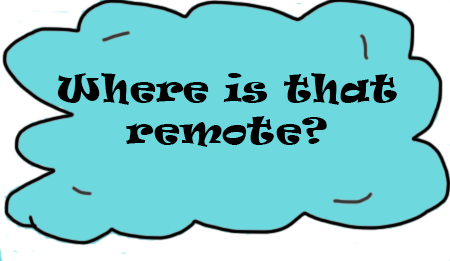
<style>
.page{position:relative;width:450px;height:261px;background:#6ed8df}
.page>*{position:absolute;margin:0}
.t1{font:35px "Ravie";letter-spacing:0.02em;color:#000000}
</style>
<div class="page">
<p class="t1" style="left:57px;top:73px;width:340px;height:74px;text-align:center">Where is that remote?</p>
</div>
